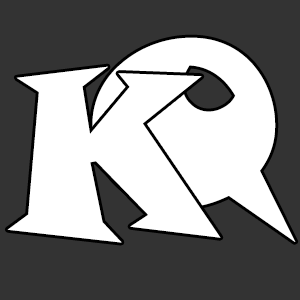
<style>
.page{position:relative;width:300px;height:300px;background:#333333}
.page>*{position:absolute;margin:0}
.t1{font:231px "SnapITC-Regular";color:#ffffff}
</style>
<div class="page">
<p class="t1" style="left:92px;top:37px;width:204px;height:205px">Q</p>
<p class="t1" style="left:7px;top:66px;width:214px;height:177px">K</p>
</div>
